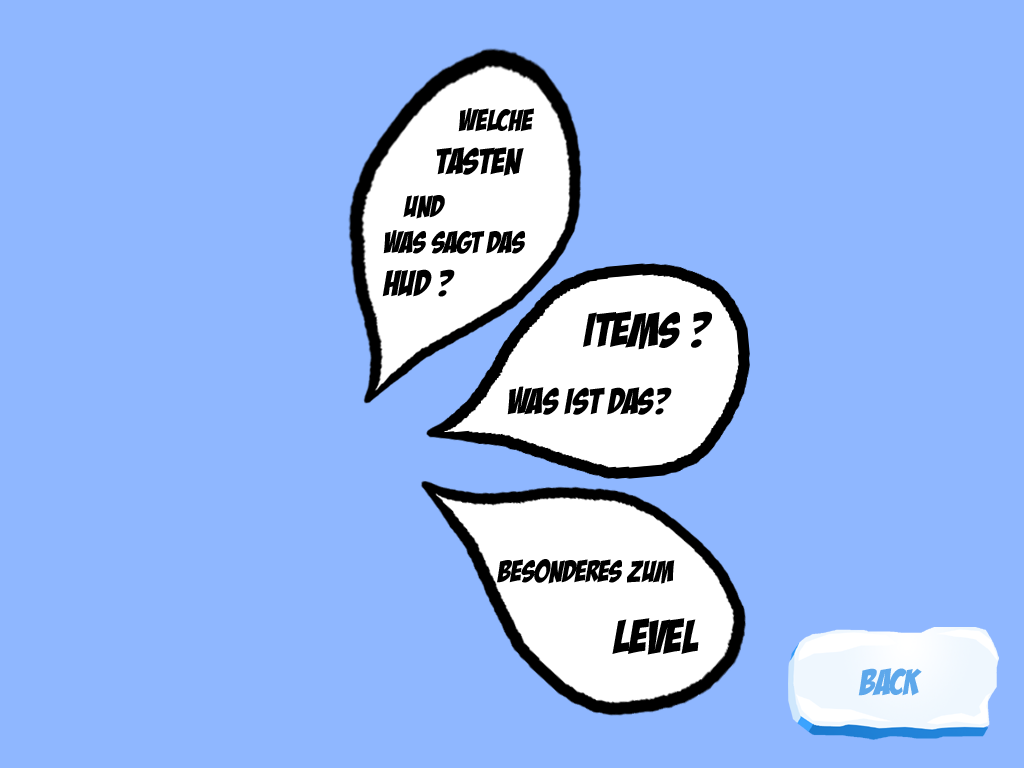
<style>
.page{position:relative;width:1024px;height:768px;background:#8fb7ff}
.page>*{position:absolute;margin:0}
.t1{font:30px "BadaBoomBB";color:#000000}
.t2{font:36px "BadaBoomBB";color:#000000}
.t3{font:48px "BadaBoomBB";color:#000000}
.t4{font:36px "BadaBoomBB";color:#5ea8eb}
</style>
<div class="page">
<p class="t1" style="left:382px;top:108px;width:152px;height:189px">Welche <br>         <span class="t2">Tasten <br>   </span>und <br>was sagt das<br><span class="t2">HUD ?</span></p>
<p class="t2" style="left:507px;top:311px;width:205px;height:104px"><span class="t3">Items ?<br><br><br></span>Was ist das?</p>
<p class="t1" style="left:497px;top:559px;width:202px;height:96px">Besonderes zum <br><br>                    <span class="t3">Level</span></p>
<p class="t4" style="left:858px;top:668px;width:64px;height:28px">Back</p>
</div>
